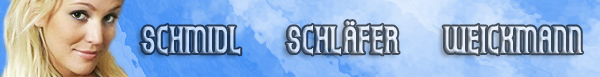
<style>
.page{position:relative;width:600px;height:77px}
.page>*{position:absolute;margin:0}
.t1{font:33px "Gothicum";letter-spacing:0.001em}
</style>
<div class="page">
<p class="t1" style="left:140px;top:21px;width:443px;height:34px">SCHMIDL   SCHLÄFER   WEICKMANN</p>
</div>
